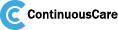
<style>
.page{position:relative;width:118px;height:30px;background:#ffffff}
.page>*{position:absolute;margin:0}
.t1{font:13.3px "FranklinGothic-Medium";color:#000000}
</style>
<div class="page">
<p class="t1" style="left:27px;top:9px;width:91px;height:10px">ContinuousCare</p>
</div>
